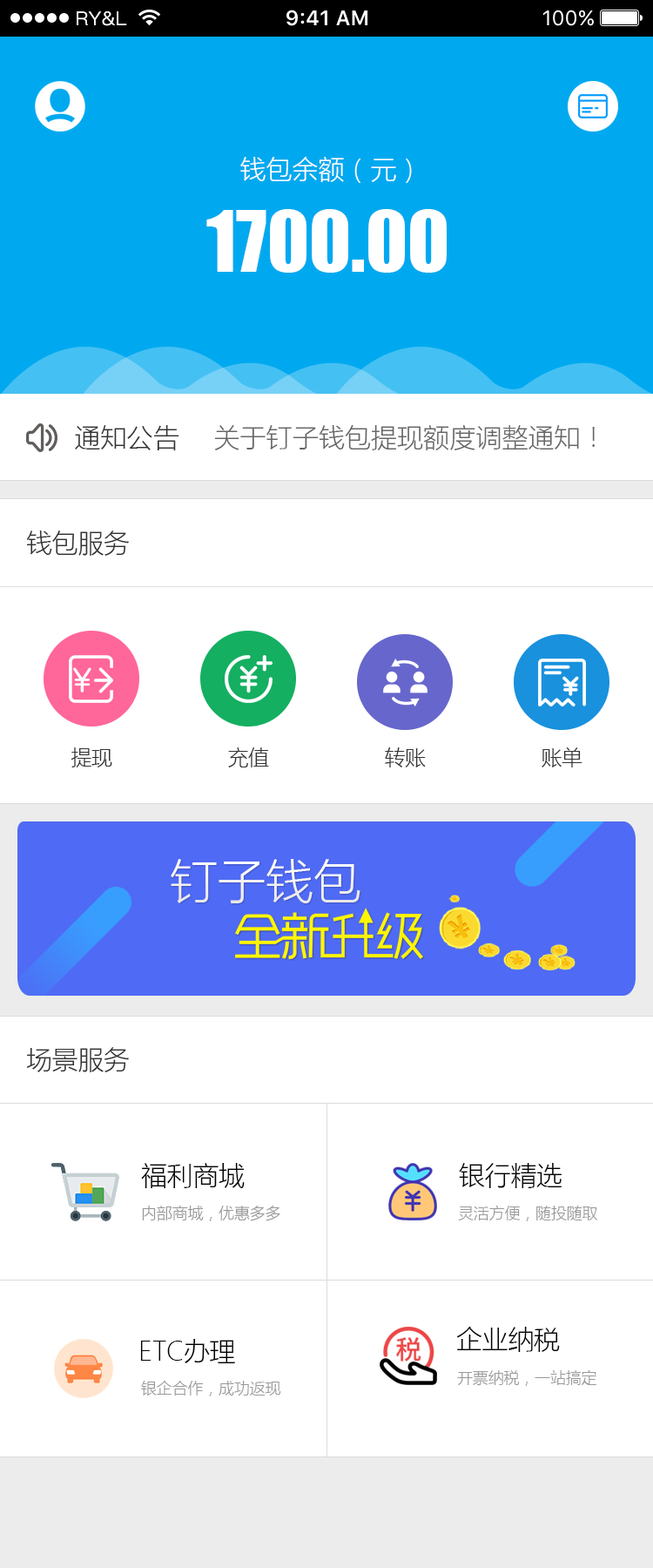
<style>
.page{position:relative;width:653px;height:1568px;background:#ffffff}
.page>*{position:absolute;margin:0}
.t1{font:26.1px "MicrosoftYaHeiLight";color:#ffffff}
.t2{font:78.4px "Impact";color:#ffffff}
.t3{font:26.1px "MicrosoftYaHeiLight";letter-spacing:0.003em;color:#323232}
.t4{font:26.1px "MicrosoftYaHeiLight";letter-spacing:0.003em;color:#666666}
.t5{font:26.1px "MicrosoftYaHeiLight";letter-spacing:-0.01em;color:#333333}
.t6{font:20.9px "MicrosoftYaHeiLight";letter-spacing:-0.01em;color:#333333}
.t7{font:47.9px "MicrosoftYaHeiLight";color:#fefeff}
.t8{font:26.1px "MicrosoftYaHeiLight";letter-spacing:-0.01em;color:#000000}
.t9{font:15.7px "MicrosoftYaHeiLight";letter-spacing:-0.01em;color:#989797}
.t10{font:15.7px "MicrosoftYaHeiLight";letter-spacing:-0.01em;color:#999999}
</style>
<div class="page">
<p class="t1" style="left:240px;top:157px;width:172px;height:26px">钱包余额（元）</p>
<p class="t2" style="left:206px;top:209px;width:241px;height:64px">1700.00</p>
<p class="t3" style="left:75px;top:425px;width:104px;height:25px">通知公告</p>
<p class="t4" style="left:214px;top:425px;width:381px;height:25px">关于钉子钱包提现额度调整通知！</p>
<p class="t5" style="left:26px;top:531px;width:103px;height:25px">钱包服务</p>
<p class="t6" style="left:71px;top:747px;width:41px;height:20px">提现</p>
<p class="t6" style="left:228px;top:747px;width:41px;height:20px">充值</p>
<p class="t6" style="left:385px;top:747px;width:41px;height:20px">转账</p>
<p class="t6" style="left:542px;top:747px;width:41px;height:20px">账单</p>
<p class="t7" style="left:171px;top:859px;width:190px;height:44px">钉子钱包</p>
<p class="t5" style="left:27px;top:1047px;width:102px;height:25px">场景服务</p>
<p class="t8" style="left:141px;top:1163px;width:104px;height:25px">福利商城</p>
<p class="t8" style="left:459px;top:1163px;width:104px;height:25px">银行精选</p>
<p class="t9" style="left:142px;top:1205px;width:138px;height:16px">内部商城，优惠多多</p>
<p class="t10" style="left:458px;top:1206px;width:140px;height:15px">灵活方便，随投随取</p>
<p class="t8" style="left:456px;top:1327px;width:104px;height:25px">企业纳税</p>
<p class="t8" style="left:140px;top:1339px;width:95px;height:24px">ETC办理</p>
<p class="t10" style="left:457px;top:1370px;width:140px;height:16px">开票纳税，一站搞定</p>
<p class="t10" style="left:141px;top:1381px;width:140px;height:15px">银企合作，成功返现</p>
</div>
